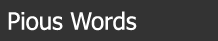
<style>
.page{position:relative;width:218px;height:41px;background:#333333}
.page>*{position:absolute;margin:0}
.t1{font:24px "Tahoma";color:#ffffff}
</style>
<div class="page">
<p class="t1" style="left:8px;top:11px;width:129px;height:20px">Pious Words</p>
</div>
